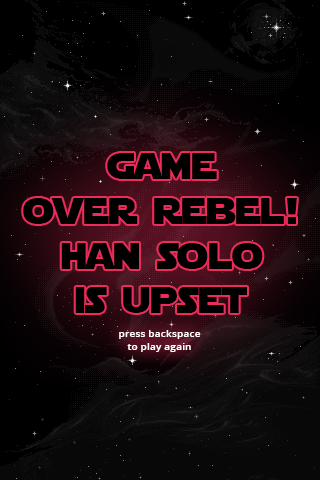
<style>
.page{position:relative;width:320px;height:480px;background:#000000}
.page>*{position:absolute;margin:0}
.t1{font:37.2px "StarJedi";color:#000000}
.t2{font:10.4px "OpenSans-Semibold";color:#ffffff}
</style>
<div class="page">
<p class="t1" style="left:23px;top:153px;width:274px;height:160px;text-align:center">game<br>over rebel!<br>han solo<br>is upset</p>
<p class="t2" style="left:119px;top:330px;width:82px;height:22px;text-align:center">press backspace<br>to play again</p>
</div>
